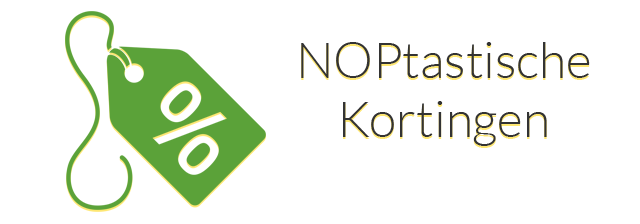
<style>
.page{position:relative;width:640px;height:224px;background:#ffffff}
.page>*{position:absolute;margin:0}
.t1{font:49.7px "Lato-Light";color:#333333}
</style>
<div class="page">
<p class="t1" style="left:301px;top:42px;width:289px;height:104px;text-align:center">NOPtastische<br>Kortingen</p>
</div>
